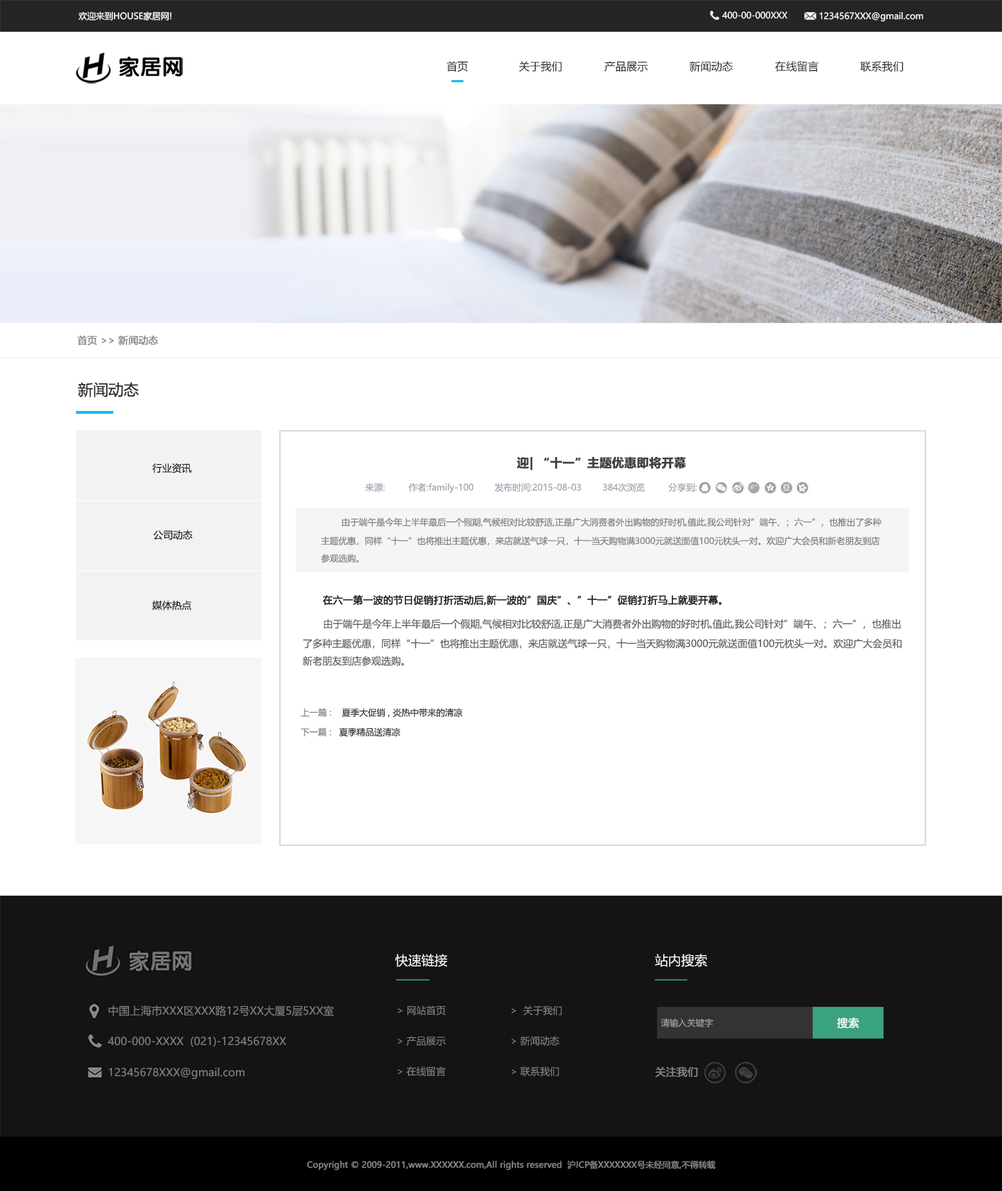
<style>
.page{position:relative;width:1002px;height:1191px;background:#ffffff}
.page>*{position:absolute;margin:0}
.t1{font:8.7px "MicrosoftYaHei";color:#ffffff}
.t2{font:10.9px "MicrosoftYaHei";color:#252525}
.t3{font:9.7px "MicrosoftYaHei";color:#818388;font-weight:bold}
.t4{font:15.2px "MicrosoftYaHei";color:#252525}
.t5{font:12.1px "MicrosoftYaHei-Bold";color:#3f3e45;font-weight:bold}
.t6{font:9.8px "MicrosoftYaHei";color:#252525}
.t7{font:8.9px "MicrosoftYaHei";color:#a5a5b1}
.t8{font:8.7px/17.4px "MicrosoftYaHei";color:#818388}
.t9{font:9.8px/19.6px "MicrosoftYaHei";color:#818388}
.t10{font:9.8px "MicrosoftYaHei";color:#252525;font-weight:bold}
.t11{font:9.8px/17.4px "MicrosoftYaHei";color:#606369}
.t12{font:9.8px/19.6px "MicrosoftYaHei";color:#606369}
.t13{font:8.7px "MicrosoftYaHei";color:#35373a}
.t14{font:8.7px "MicrosoftYaHei";color:#818388}
.t15{font:13.1px "MicrosoftYaHei";color:#ffffff}
.t16{font:10.9px "MicrosoftYaHei";color:#818388}
.t17{font:9.8px/30.4px "MicrosoftYaHei";color:#818388}
.t18{font:8.7px "MicrosoftYaHei";color:#adadad}
.t19{font:10.9px "MicrosoftYaHei";color:#ffffff;font-weight:bold}
.t20{font:10.4px "MicrosoftYaHei";color:#818388;font-weight:bold}
.t21{font:8.3px "MicrosoftYaHei";color:#818388;font-weight:bold}
</style>
<div class="page">
<p class="t1" style="left:78px;top:11px;width:93px;height:10px">欢迎来到HOUSE家居网!</p>
<p class="t1" style="left:722px;top:11px;width:65px;height:8px">400-00-000XXX</p>
<p class="t1" style="left:819px;top:12px;width:104px;height:10px">1234567XXX@gmail.com</p>
<p class="t2" style="left:446px;top:61px;width:22px;height:11px">首页</p>
<p class="t2" style="left:518px;top:61px;width:44px;height:11px">关于我们</p>
<p class="t2" style="left:604px;top:61px;width:43px;height:11px">产品展示</p>
<p class="t2" style="left:689px;top:61px;width:43px;height:11px">新闻动态</p>
<p class="t2" style="left:775px;top:61px;width:43px;height:11px">在线留言</p>
<p class="t2" style="left:860px;top:61px;width:43px;height:11px">联系我们</p>
<p class="t3" style="left:77px;top:335px;width:81px;height:10px">首页 &gt;&gt; 新闻动态</p>
<p class="t4" style="left:78px;top:382px;width:61px;height:15px">新闻动态</p>
<p class="t5" style="left:516px;top:456px;width:170px;height:14px">迎| “十一”主题优惠即将开幕</p>
<p class="t6" style="left:152px;top:463px;width:40px;height:10px">行业资讯</p>
<p class="t7" style="left:365px;top:482px;width:332px;height:11px">来源:         作者:family-100        发布时间:2015-08-03        384次浏览         分享到:</p>
<p class="t8" style="left:321px;top:518px;width:560px;height:45px"><span class="t9">       </span>由于端午是今年上半年最后一个假期,气候相对比较舒适,正是广大消费者外出购物的好时机,值此,我公司针对”端午、；六一”，也推出了多种<br>主题优惠，同样“十一”也将推出主题优惠，来店就送气球一只，十一当天购物满3000元就送面值100元枕头一对。欢迎广大会员和新老朋友到店<br>参观选购。</p>
<p class="t6" style="left:153px;top:530px;width:40px;height:10px">公司动态</p>
<p class="t6" style="left:152px;top:600px;width:39px;height:11px">媒体热点</p>
<p class="t10" style="left:322px;top:595px;width:400px;height:11px">在六一第一波的节日促销打折活动后,新一波的”国庆”、”十一”促销打折马上就要开幕。</p>
<p class="t11" style="left:302px;top:618px;width:600px;height:48px"><span class="t12">       </span>由于端午是今年上半年最后一个假期,气候相对比较舒适,正是广大消费者外出购物的好时机,值此,我公司针对”端午、；六一”，也推出<br>了多种主题优惠，同样“十一”也将推出主题优惠，来店就送气球一只，十一当天购物满3000元就送面值100元枕头一对。欢迎广大会员和<br>新老朋友到店参观选购。</p>
<p class="t13" style="left:300px;top:708px;width:163px;height:9px"><span class="t14">上一篇 :    </span>夏季大促销 , 炎热中带来的清凉</p>
<p class="t13" style="left:300px;top:727px;width:100px;height:10px"><span class="t14">下一篇 :   </span>夏季精品送清凉</p>
<p class="t15" style="left:395px;top:953px;width:52px;height:14px">快速链接</p>
<p class="t15" style="left:654px;top:953px;width:53px;height:14px">站内搜索</p>
<p class="t16" style="left:108px;top:1005px;width:226px;height:11px">中国上海市XXX区XXX路12号XX大厦5层5XX室</p>
<p class="t17" style="left:397px;top:1005px;width:49px;height:71px">&gt; 网站首页<br>&gt; 产品展示<br>&gt; 在线留言</p>
<p class="t17" style="left:511px;top:1005px;width:51px;height:71px">&gt;  关于我们<br>&gt; 新闻动态<br>&gt; 联系我们</p>
<p class="t18" style="left:660px;top:1018px;width:53px;height:9px">请输入关键字</p>
<p class="t19" style="left:836px;top:1017px;width:23px;height:11px">搜索</p>
<p class="t16" style="left:108px;top:1036px;width:178px;height:11px">400-000-XXXX  (021)-12345678XX</p>
<p class="t16" style="left:108px;top:1067px;width:136px;height:12px">12345678XXX@gmail.com</p>
<p class="t20" style="left:655px;top:1066px;width:43px;height:11px">关注我们</p>
<p class="t21" style="left:307px;top:1160px;width:408px;height:10px">Copyright © 2009-2011,www.XXXXXX.com,All rights reserved  沪ICP备XXXXXXX号未经同意,不得转载</p>
</div>
